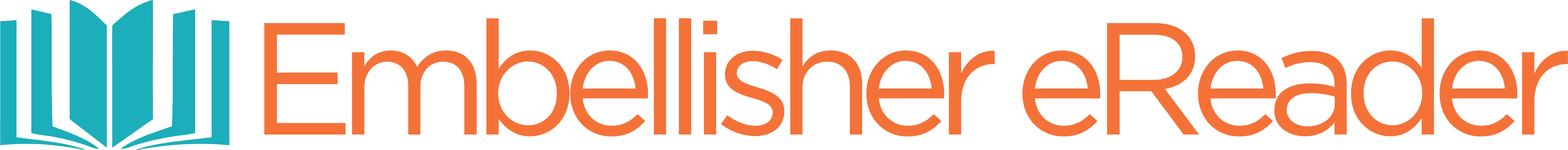
<style>
.page{position:relative;width:1568px;height:150px;background:#ffffff}
.page>*{position:absolute;margin:0}
.t1{font:158.9px "Gotham-Book";letter-spacing:-0.105em;color:#f47238}
</style>
<div class="page">
<p class="t1" style="left:264px;top:18px;width:1304px;height:118px">Embellisher eReader</p>
</div>
